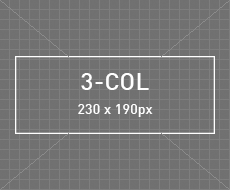
<style>
.page{position:relative;width:230px;height:190px;background:#717171}
.page>*{position:absolute;margin:0}
.t1{font:14px/24px "DIN-Medi";letter-spacing:0.015em;color:#ffffff}
.t2{font:24px/24px "DIN-Medi";letter-spacing:0.015em;color:#ffffff}
</style>
<div class="page">
<p class="t1" style="left:78px;top:73px;width:75px;height:44px;text-align:center"><span class="t2">3-COL<br></span>230 x 190px</p>
</div>
